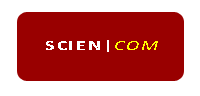
<style>
.page{position:relative;width:200px;height:96px;background:#990000}
.page>*{position:absolute;margin:0}
.t1{font:14px "Calibri-Bold";letter-spacing:0.1em;color:#ffffff;scale:1.41 1}
.t2{font:14px "Calibri-Italic";letter-spacing:0.1em;color:#ffff00;scale:1.41 1}
</style>
<div class="page">
<p class="t1" style="left:46px;top:40px;width:112px;height:12px">SCIEN|<span class="t2">COM</span></p>
</div>
